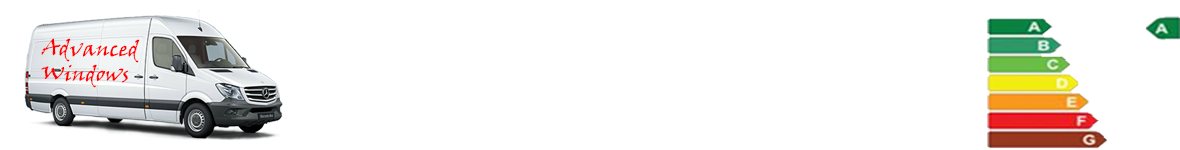
<style>
.page{position:relative;width:1180px;height:150px;background:#ffffff}
.page>*{position:absolute;margin:0}
.t1{font:21.1px "VinerHandITC";color:#ff0000}
</style>
<div class="page">
<p class="t1" style="left:41px;top:38px;width:99px;height:50px;rotate:1deg">Advanced<br>Windows</p>
</div>
